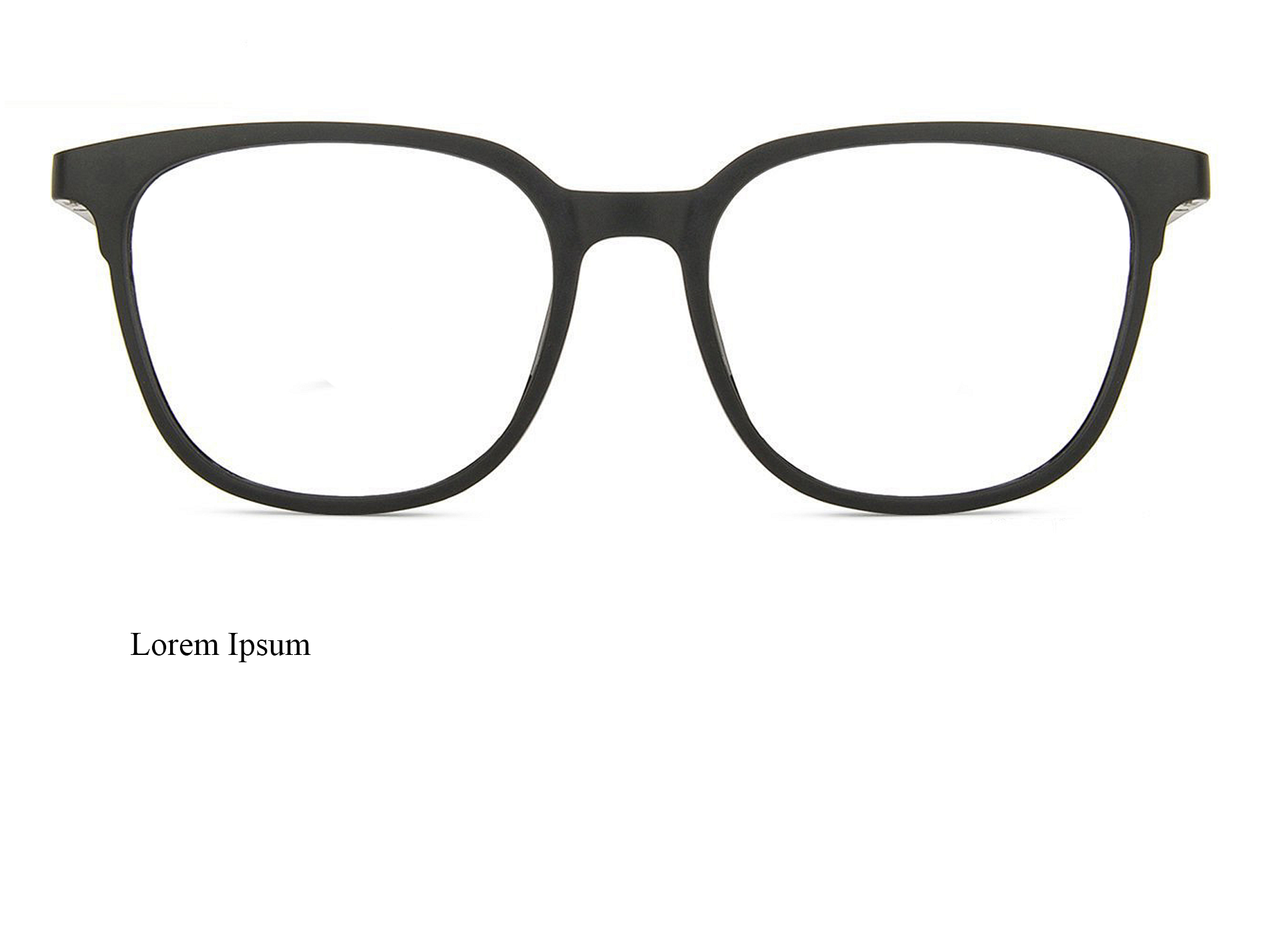
<style>
.page{position:relative;width:1261px;height:946px;background:#ffffff}
.page>*{position:absolute;margin:0}
.t1{font:33.4px "TimesNewRomanPSMT";color:#000000}
</style>
<div class="page">
<p class="t1" style="left:130px;top:633px;width:181px;height:29px">Lorem Ipsum</p>
</div>
